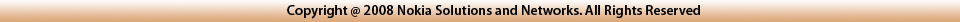
<style>
.page{position:relative;width:960px;height:22px}
.page>*{position:absolute;margin:0}
.t1{font:14px "MyriadPro-Semibold";color:#000000}
</style>
<div class="page">
<p class="t1" style="left:287px;top:5px;width:413px;height:14px">Copyright @ 2008 Nokia Solutions and Networks. All Rights Reserved</p>
</div>
